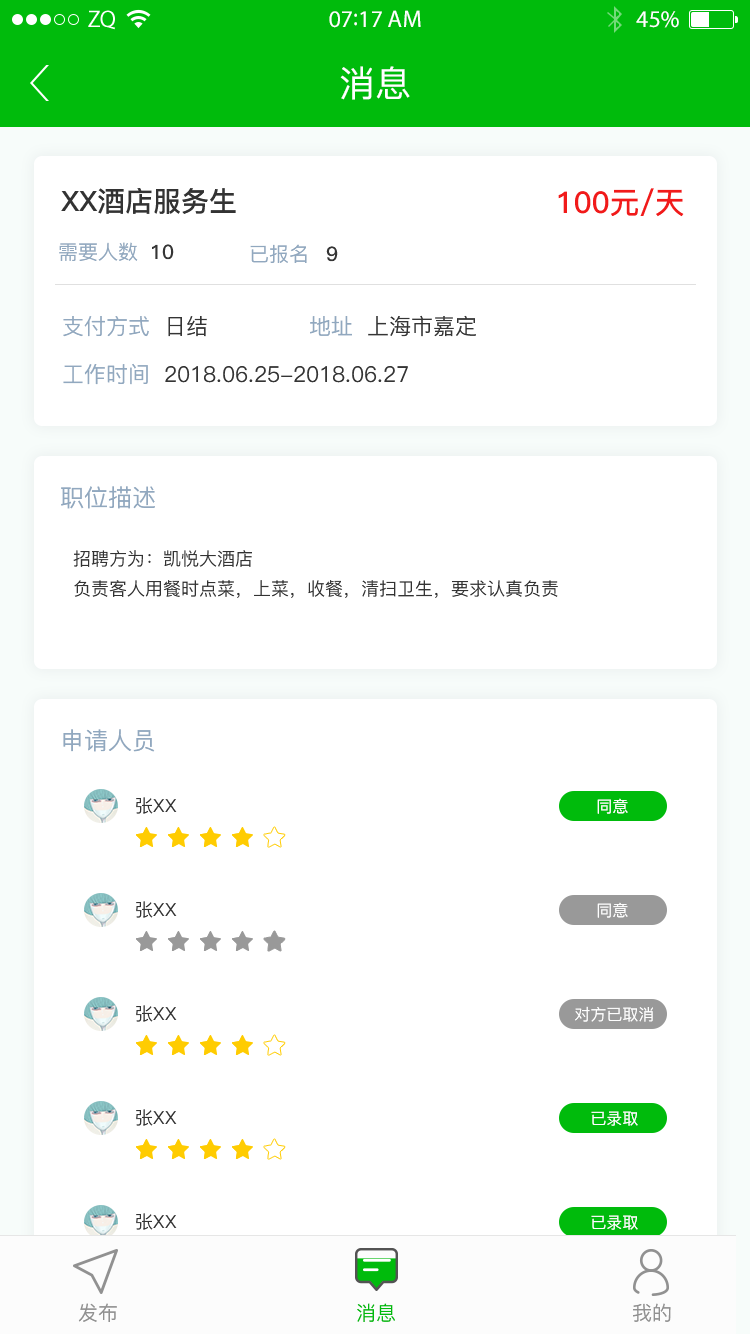
<style>
.page{position:relative;width:750px;height:1334px;background:#ffffff}
.page>*{position:absolute;margin:0}
.t1{font:24px "MyriadPro-Regular";color:#ffffff}
.t2{font:36px "PingFang-SC-Medium";color:#ffffff}
.t3{font:28px "PingFang-SC-Bold";color:#333333}
.t4{font:30px "PingFang-SC-Bold";color:#f11a1a}
.t5{font:20px "PingFang-SC-Medium";color:#91a8bf}
.t6{font:20px "PingFang-SC-Bold";color:#353535}
.t7{font:22px "PingFang-SC-Medium";color:#91a8bf}
.t8{font:22px "PingFang-SC-Medium";color:#353535}
.t9{font:24px "PingFang-SC-Medium";color:#91a8bf}
.t10{font:18px/30px "PingFang-SC-Medium";color:#333333}
.t11{font:18px "PingFang-SC-Medium";color:#333333}
.t12{font:16px "PingFang-SC-Medium";color:#ffffff}
.t13{font:20px "PingFang-SC-Medium";color:#919191}
.t14{font:20px "PingFang-SC-Medium";color:#00bb0c}
</style>
<div class="page">
<p class="t1" style="left:329px;top:10px;width:92px;height:18px">07:17 AM</p>
<p class="t1" style="left:636px;top:11px;width:43px;height:17px">45%</p>
<p class="t2" style="left:340px;top:66px;width:70px;height:34px">消息</p>
<p class="t3" style="left:61px;top:188px;width:175px;height:26px">XX酒店服务生</p>
<p class="t4" style="left:558px;top:188px;width:126px;height:29px">100元/天</p>
<p class="t5" style="left:59px;top:242px;width:79px;height:19px">需要人数</p>
<p class="t6" style="left:152px;top:244px;width:22px;height:16px">10</p>
<p class="t5" style="left:250px;top:244px;width:57px;height:19px">已报名</p>
<p class="t6" style="left:326px;top:246px;width:12px;height:16px">9</p>
<p class="t7" style="left:63px;top:316px;width:144px;height:21px">支付方式  <span class="t8">日结</span></p>
<p class="t8" style="left:310px;top:315px;width:166px;height:22px"><span class="t7">地址  </span>上海市嘉定</p>
<p class="t8" style="left:63px;top:363px;width:345px;height:22px"><span class="t7">工作时间  </span>2018.06.25-2018.06.27</p>
<p class="t9" style="left:61px;top:486px;width:94px;height:23px">职位描述</p>
<p class="t10" style="left:73px;top:550px;width:485px;height:48px">招聘方为：凯悦大酒店<br>负责客人用餐时点菜，上菜，收餐，清扫卫生，要求认真负责</p>
<p class="t9" style="left:63px;top:729px;width:92px;height:23px">申请人员</p>
<p class="t11" style="left:136px;top:797px;width:41px;height:17px">张XX</p>
<p class="t12" style="left:597px;top:798px;width:31px;height:16px">同意</p>
<p class="t11" style="left:136px;top:901px;width:41px;height:17px">张XX</p>
<p class="t12" style="left:597px;top:902px;width:31px;height:16px">同意</p>
<p class="t11" style="left:136px;top:1005px;width:41px;height:17px">张XX</p>
<p class="t12" style="left:575px;top:1006px;width:78px;height:16px">对方已取消</p>
<p class="t11" style="left:136px;top:1109px;width:41px;height:17px">张XX</p>
<p class="t12" style="left:591px;top:1111px;width:47px;height:15px">已录取</p>
<p class="t11" style="left:136px;top:1213px;width:41px;height:17px">张XX</p>
<p class="t12" style="left:591px;top:1215px;width:47px;height:15px">已录取</p>
<p class="t13" style="left:78px;top:1303px;width:39px;height:19px">发布</p>
<p class="t14" style="left:357px;top:1303px;width:38px;height:19px">消息</p>
<p class="t13" style="left:633px;top:1303px;width:38px;height:19px">我的</p>
</div>
